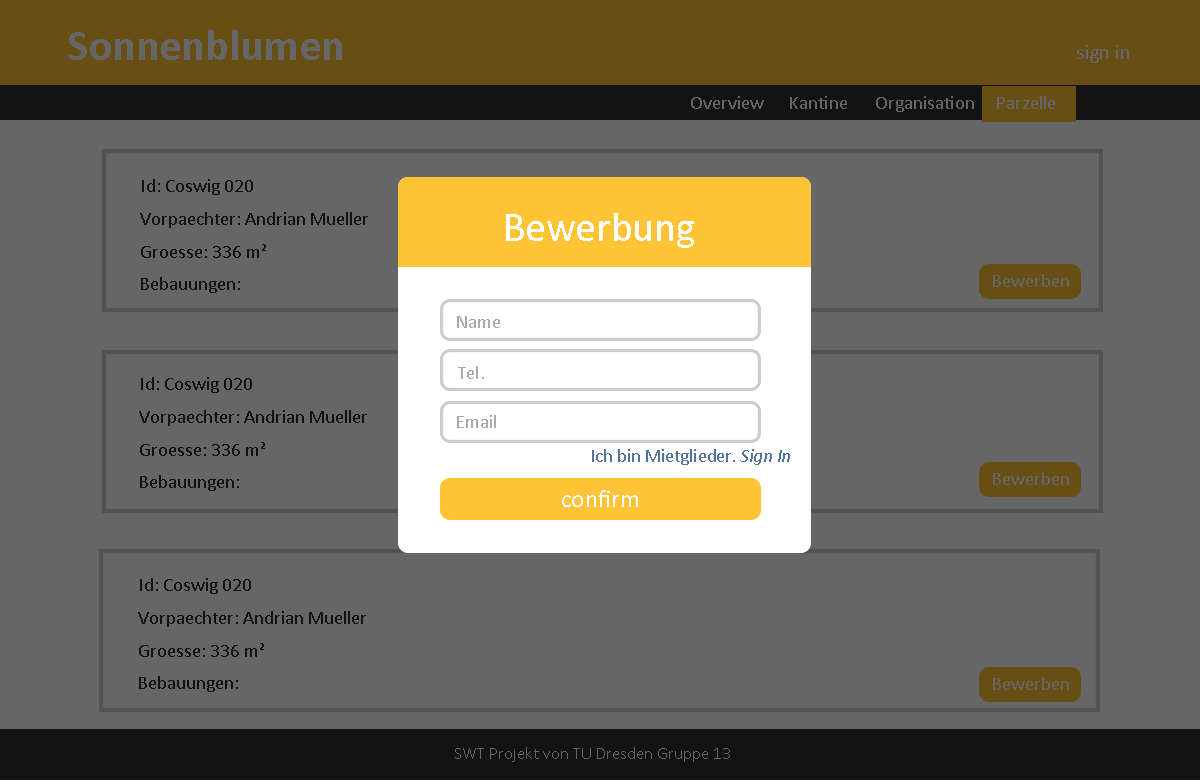
<style>
.page{position:relative;width:1200px;height:780px;background:#666666}
.page>*{position:absolute;margin:0}
.t1{font:44px "Calibri-Bold";color:#666666}
.t2{font:20.8px "Calibri";color:#666666}
.t3{font:18.8px "Calibri";color:#666666}
.t4{font:18.8px "Calibri";color:#131313}
.t5{font:41.7px "Calibri";color:#ffffff}
.t6{font:18.7px "Calibri";color:#aaaaaa}
.t7{font:18.8px "Calibri";color:#aaaaaa}
.t8{font:18.7px "Calibri";color:#53759d}
.t9{font:18.7px "Calibri-Italic";color:#53759d}
.t10{font:25px "Calibri";color:#ffffff}
.t11{font:16.7px "Calibri";color:#666666}
</style>
<div class="page">
<p class="t1" style="left:69px;top:30px;width:273px;height:30px">Sonnenblumen</p>
<p class="t2" style="left:1077px;top:45px;width:52px;height:18px">sign in</p>
<p class="t3" style="left:691px;top:96px;width:73px;height:13px">Overview</p>
<p class="t3" style="left:790px;top:96px;width:57px;height:13px">Kantine</p>
<p class="t3" style="left:876px;top:96px;width:98px;height:16px">Organisation</p>
<p class="t3" style="left:997px;top:96px;width:58px;height:13px">Parzelle</p>
<p class="t4" style="left:140px;top:179px;width:228px;height:114px">Id: Coswig 020<br>Vorpaechter: Andrian Mueller <br>Groesse: 336 m²<br>Bebauungen:</p>
<p class="t5" style="left:506px;top:213px;width:188px;height:35px">Bewerbung</p>
<p class="t3" style="left:993px;top:274px;width:76px;height:13px">Bewerben</p>
<p class="t6" style="left:457px;top:316px;width:43px;height:12px">Name</p>
<p class="t6" style="left:458px;top:366px;width:26px;height:13px">Tel.</p>
<p class="t4" style="left:139px;top:377px;width:228px;height:114px">Id: Coswig 020<br>Vorpaechter: Andrian Mueller <br>Groesse: 336 m²<br>Bebauungen:</p>
<p class="t7" style="left:457px;top:415px;width:39px;height:13px">Email</p>
<p class="t8" style="left:592px;top:449px;width:198px;height:16px">Ich bin Mietglieder. <span class="t9">Sign In</span></p>
<p class="t3" style="left:993px;top:472px;width:76px;height:13px">Bewerben</p>
<p class="t10" style="left:562px;top:490px;width:76px;height:17px">confirm</p>
<p class="t4" style="left:138px;top:578px;width:228px;height:114px">Id: Coswig 020<br>Vorpaechter: Andrian Mueller <br>Groesse: 336 m²<br>Bebauungen:</p>
<p class="t3" style="left:993px;top:677px;width:76px;height:13px">Bewerben</p>
<p class="t11" style="left:455px;top:747px;width:275px;height:15px">SWT Projekt von TU Dresden Gruppe 13</p>
</div>
